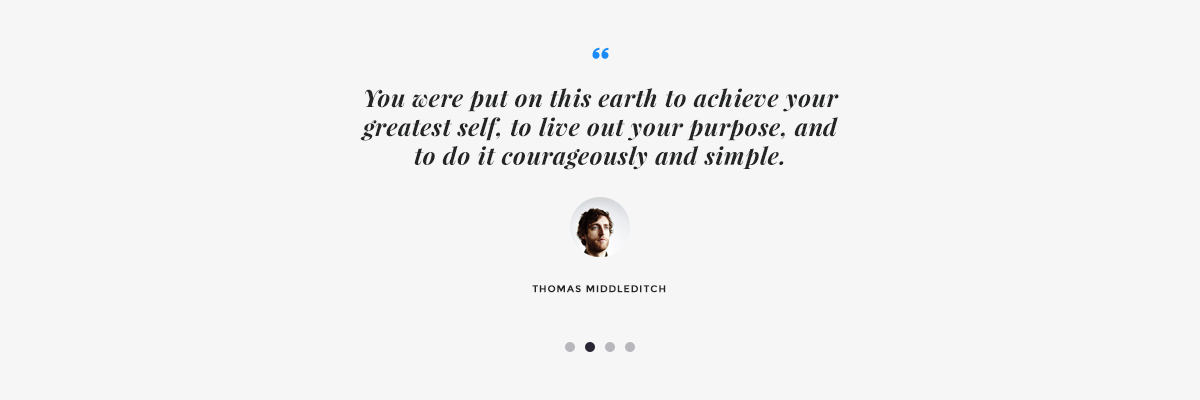
<style>
.page{position:relative;width:1200px;height:400px;background:#f6f6f6}
.page>*{position:absolute;margin:0}
.t1{font:24px "PlayfairDisplay-BoldItalic";letter-spacing:0.025em;color:#242526}
.t2{font:10px "Montserrat-Bold";letter-spacing:0.08em;color:#242526;text-transform:uppercase}
</style>
<div class="page">
<p class="t1" style="left:360px;top:88px;width:479px;height:82px;text-align:center">You were put on this earth to achieve your greatest self, to live out your purpose, and to do it courageously and simple.</p>
<p class="t2" style="left:532px;top:285px;width:134px;height:8px">Thomas Middleditch</p>
</div>
